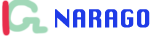
<style>
.page{position:relative;width:162px;height:36px;background:#ffffff}
.page>*{position:absolute;margin:0}
.t1{font:24px "Krungthep";color:#1f3be7}
</style>
<div class="page">
<p class="t1" style="left:55px;top:9px;width:95px;height:19px">NARAGO</p>
</div>
